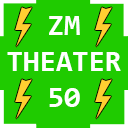
<style>
.page{position:relative;width:128px;height:128px;background:#1fcb00}
.page>*{position:absolute;margin:0}
.t1{font:30px "Consolas-Bold";color:#ffffff}
</style>
<div class="page">
<p class="t1" style="left:7px;top:16px;width:114px;height:91px;text-align:center">ZM<br>THEATER<br>50</p>
</div>
